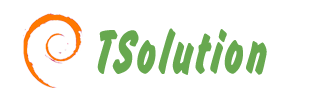
<style>
.page{position:relative;width:320px;height:96px;background:#ffffff}
.page>*{position:absolute;margin:0}
.t1{font:68.6px "UVNHaiLong";letter-spacing:0.05em;color:#67a84f;scale:0.7 1}
</style>
<div class="page">
<p class="t1" style="left:97px;top:28px;width:170px;height:47px">TSolution</p>
</div>
